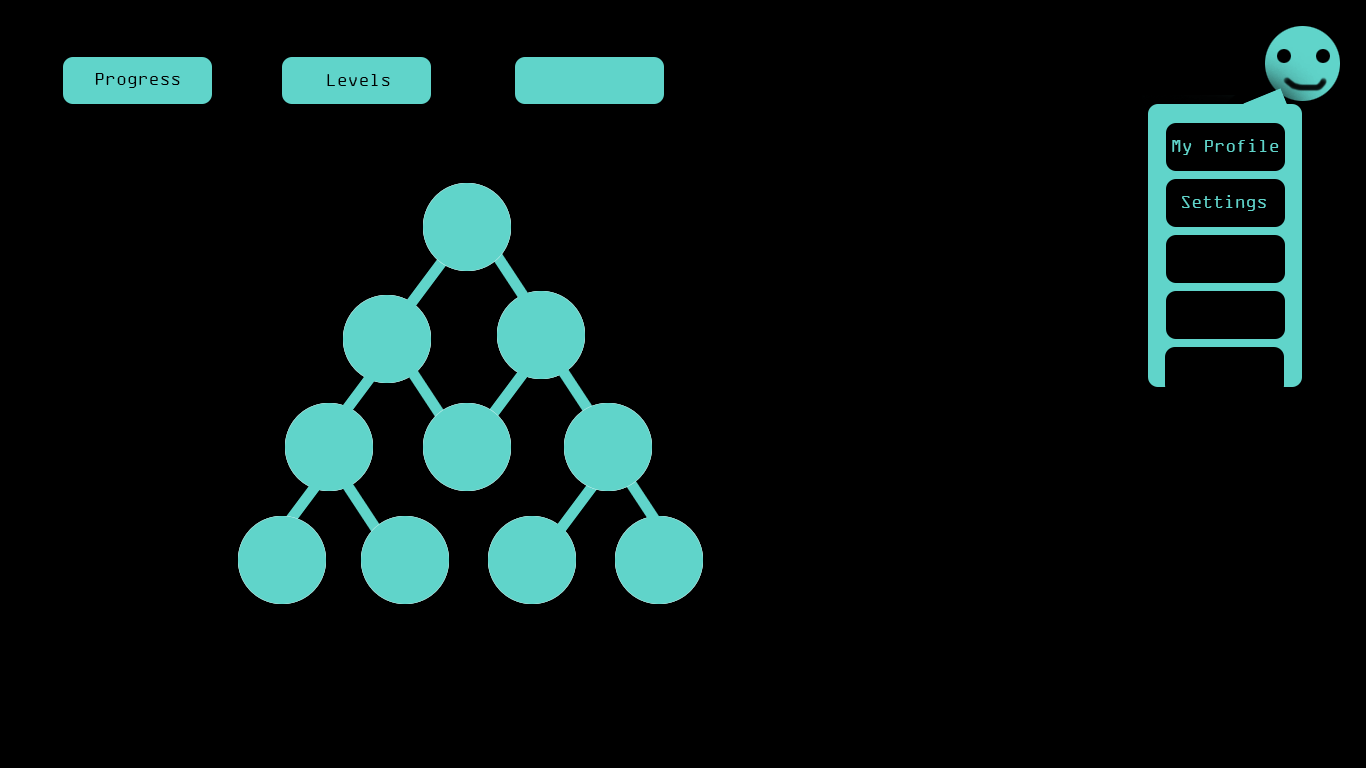
<style>
.page{position:relative;width:1366px;height:768px;background:#000000}
.page>*{position:absolute;margin:0}
.t1{font:18px "OCRAExtended";color:#000101}
.t2{font:18px "OCRAExtended";color:#60d4ca}
</style>
<div class="page">
<p class="t1" style="left:95px;top:73px;width:85px;height:15px">Progress</p>
<p class="t1" style="left:327px;top:74px;width:63px;height:12px">Levels</p>
<p class="t2" style="left:1172px;top:139px;width:107px;height:16px">My Profile</p>
<p class="t2" style="left:1182px;top:195px;width:84px;height:16px">Settings</p>
</div>
